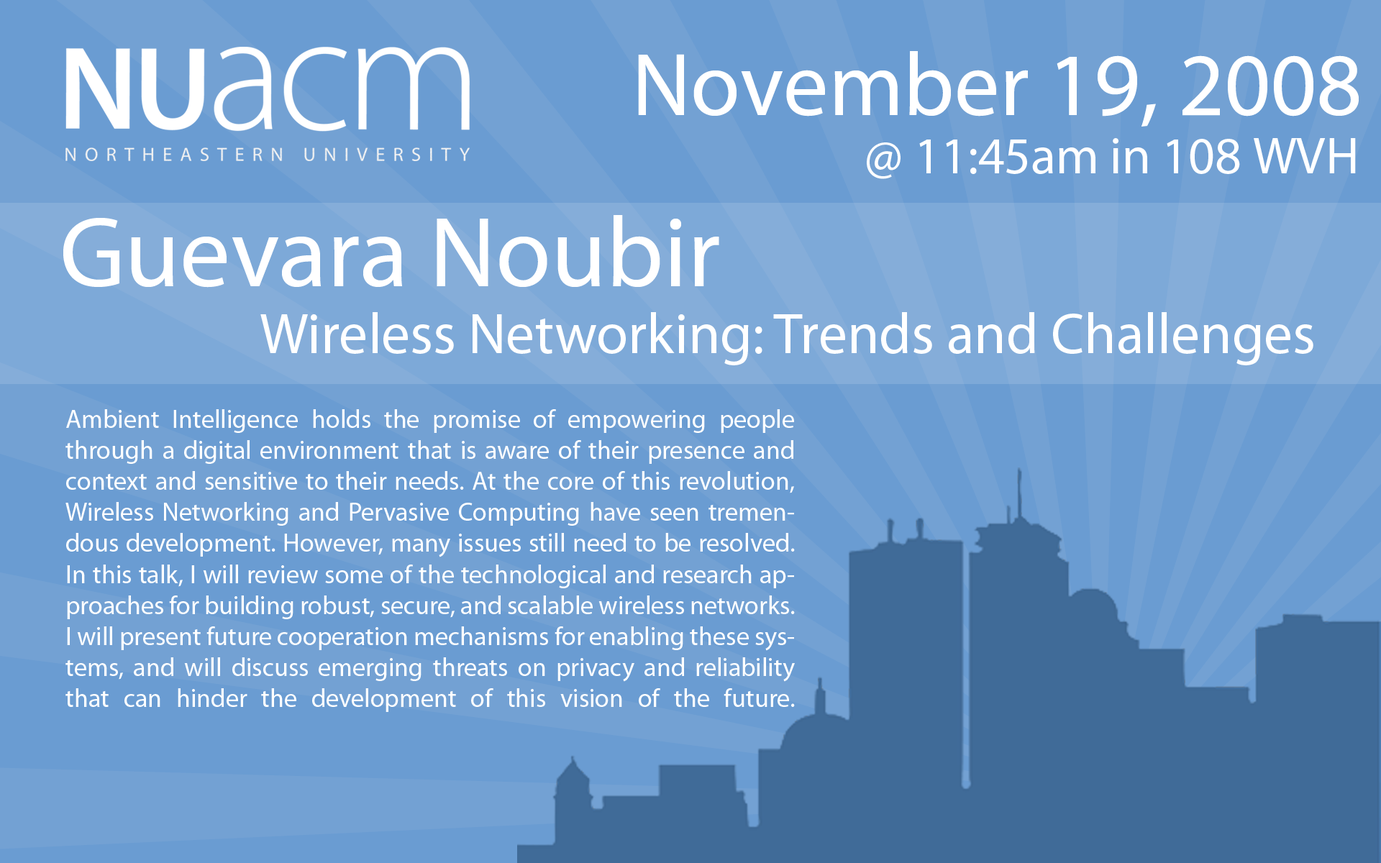
<style>
.page{position:relative;width:1381px;height:863px;background:#6a9cd2}
.page>*{position:absolute;margin:0}
.t1{font:89.9px "MyriadPro-Regular";color:#ffffff}
.t2{font:51.8px "MyriadPro-Regular";color:#ffffff}
.t3{font:100.7px "MyriadPro-Regular";color:#ffffff}
.t4{font:57.6px "MyriadPro-Regular";color:#ffffff}
.t5{font:25.9px "MyriadPro-Regular";color:#ffffff}
</style>
<div class="page">
<p class="t1" style="left:638px;top:51px;width:721px;height:76px">November 19, 2008</p>
<p class="t2" style="left:867px;top:138px;width:489px;height:41px">@ 11:45am in 108 WVH</p>
<p class="t3" style="left:63px;top:215px;width:656px;height:73px">Guevara Noubir</p>
<p class="t4" style="left:260px;top:312px;width:1054px;height:53px">Wireless Networking: Trends and Challenges</p>
<p class="t5" style="left:65px;top:409px;width:730px;height:303px;text-align:justify">Ambient Intelligence holds the promise of empowering people through a digital environment that is aware of their presence and context and sensitive to their needs. At the core of this revolution, Wireless Networking and Pervasive Computing have seen tremendous development. However, many issues still need to be resolved. In this talk, I will review some of the technological and research approaches for building robust, secure, and scalable wireless networks. I will present future cooperation mechanisms for enabling these systems, and will discuss emerging threats on privacy and reliability that can hinder the development of this vision of the future.</p>
</div>
